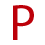
<style>
.page{position:relative;width:45px;height:45px;background:#ffffff}
.page>*{position:absolute;margin:0}
.t1{font:50.3px "MyriadPro-Regular";color:#bc0009}
</style>
<div class="page">
<p class="t1" style="left:13px;top:5px;width:21px;height:35px">P</p>
</div>
